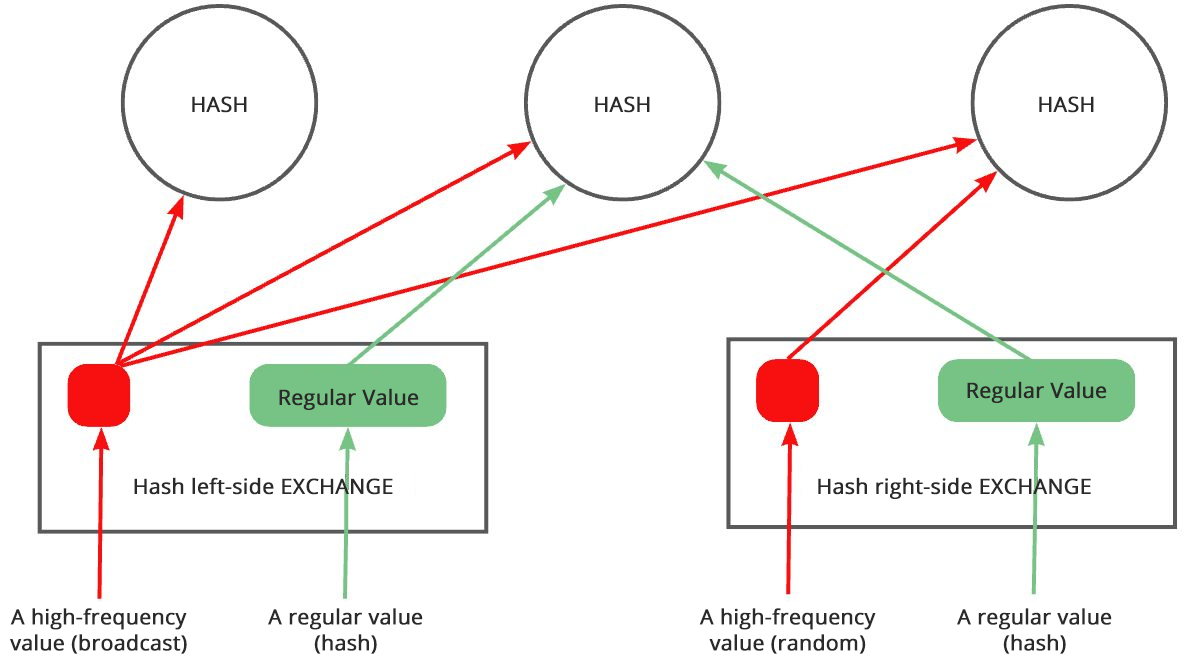
<style>
.page{position:relative;width:1190px;height:668px;background:#ffffff}
.page>*{position:absolute;margin:0}
.t1{font:21px "OpenSans";color:#2a2a2a;font-weight:bold}
.t2{font:21px/26px "OpenSans";color:#2a2a2a;font-weight:bold}
</style>
<div class="page">
<p class="t1" style="left:192px;top:96px;width:55px;height:17px">HASH</p>
<p class="t1" style="left:595px;top:96px;width:55px;height:17px">HASH</p>
<p class="t1" style="left:1039px;top:96px;width:55px;height:17px">HASH</p>
<p class="t1" style="left:279px;top:388px;width:140px;height:22px">Regular Value</p>
<p class="t1" style="left:967px;top:381px;width:140px;height:22px">Regular Value</p>
<p class="t1" style="left:134px;top:477px;width:259px;height:18px">Hash left-side EXCHANGE</p>
<p class="t1" style="left:818px;top:477px;width:273px;height:22px">Hash right-side EXCHANGE</p>
<p class="t2" style="left:10px;top:608px;width:177px;height:46px;text-align:center">A high-frequency value (broadcast)</p>
<p class="t2" style="left:268px;top:608px;width:155px;height:46px;text-align:center">A regular value (hash)</p>
<p class="t2" style="left:699px;top:608px;width:177px;height:46px;text-align:center">A high-frequency value (random)</p>
<p class="t2" style="left:957px;top:608px;width:155px;height:46px;text-align:center">A regular value (hash)</p>
</div>
